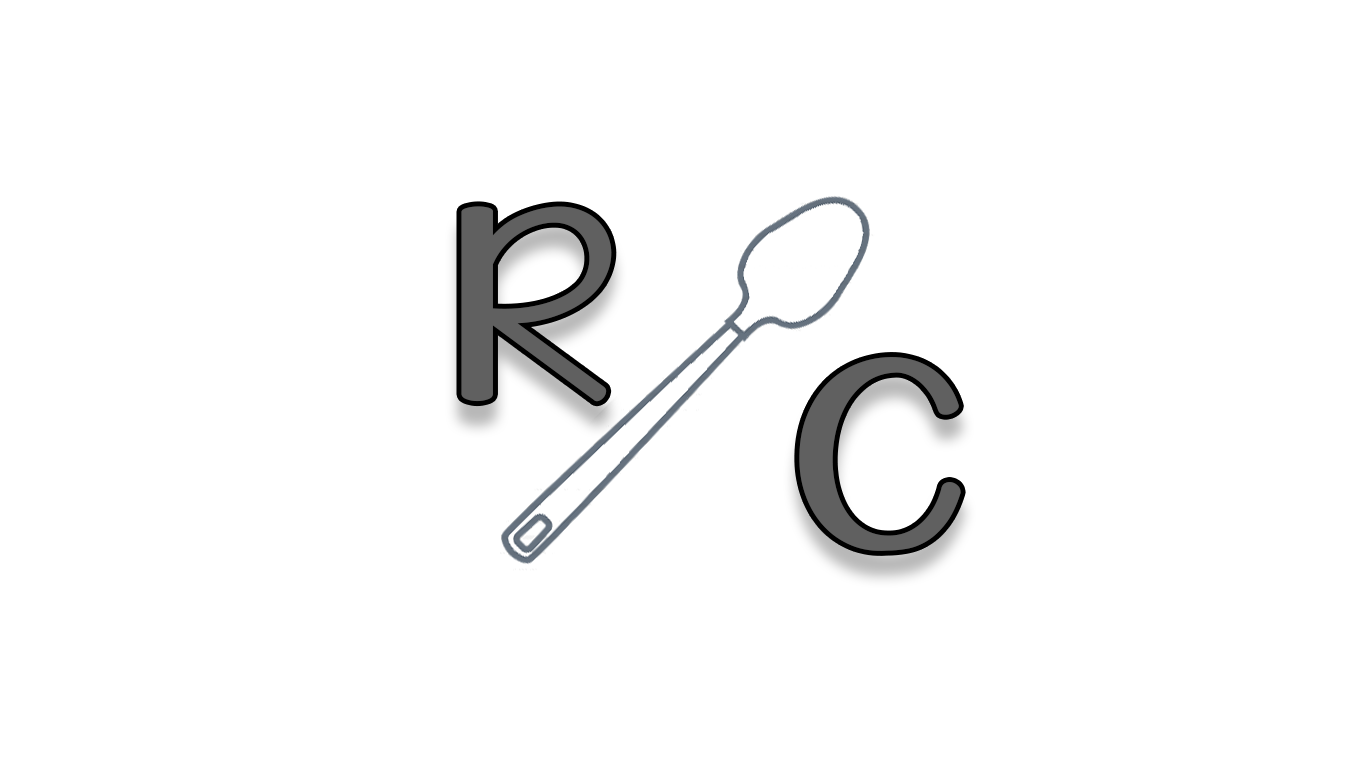
<style>
.page{position:relative;width:1366px;height:768px;background:#ffffff}
.page>*{position:absolute;margin:0}
.t1{font:215.7px "KGDarkSide";letter-spacing:0.1em;color:#606060}
</style>
<div class="page">
<p class="t1" style="left:461px;top:206px;width:151px;height:196px">R</p>
<p class="t1" style="left:799px;top:357px;width:162px;height:194px">C</p>
</div>
